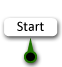
<style>
.page{position:relative;width:62px;height:67px;background:#ffffff}
.page>*{position:absolute;margin:0}
.t1{font:14px "Calibri";color:#000000}
</style>
<div class="page">
<p class="t1" style="left:17px;top:21px;width:27px;height:10px">Start</p>
</div>
